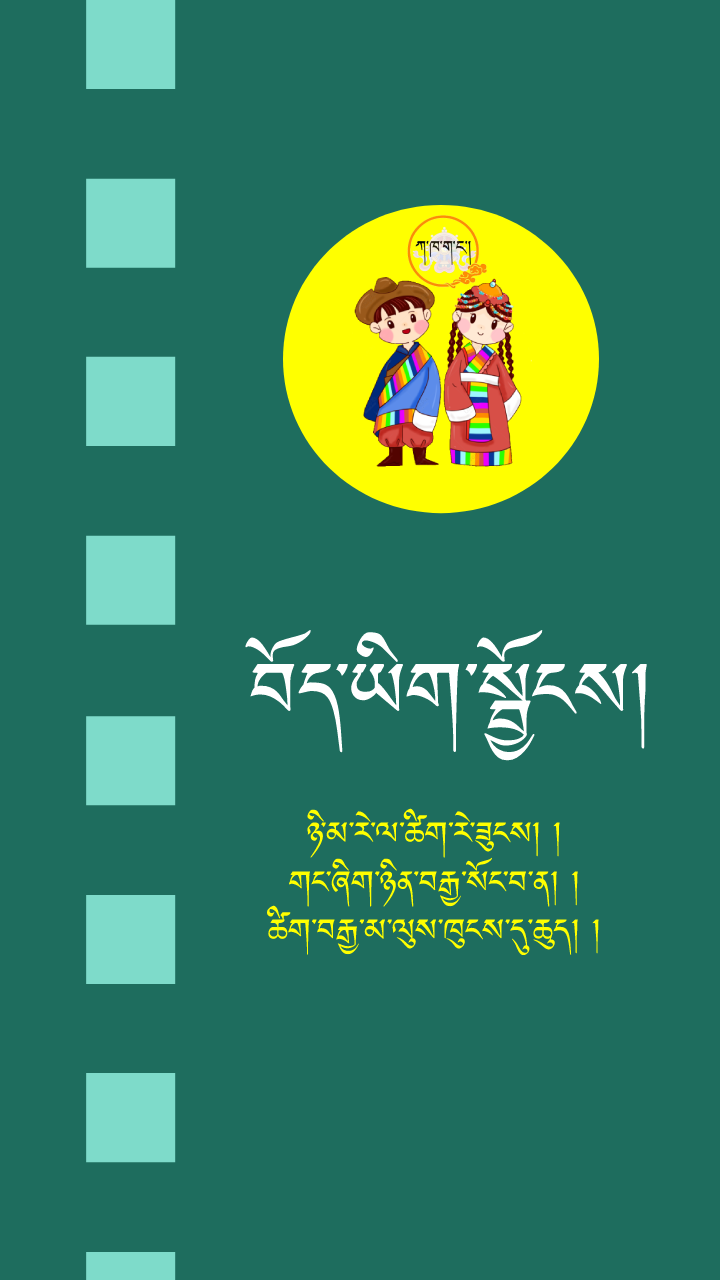
<style>
.page{position:relative;width:720px;height:1280px;background:#1e6d5e}
.page>*{position:absolute;margin:0}
.t1{font:100.3px "Jomolhari-Regular";color:#ffffff}
.t2{font:40.1px "Jomolhari-Regular";color:#ffff00}
</style>
<div class="page">
<p class="t1" style="left:245px;top:630px;width:402px;height:131px">བོད་ཡིག་སྦྱོངས།</p>
<p class="t2" style="left:267px;top:808px;width:332px;height:148px;text-align:center">ཉི་མ་རེ་ལ་ཚིག་རེ་ཟུངས། །<br> གང་ཞིག་ཉིན་བརྒྱ་སོང་བ་ན། ། <br>ཚིག་བརྒྱ་མ་ལུས་ཁུངས་དུ་ཆུད། །</p>
</div>
